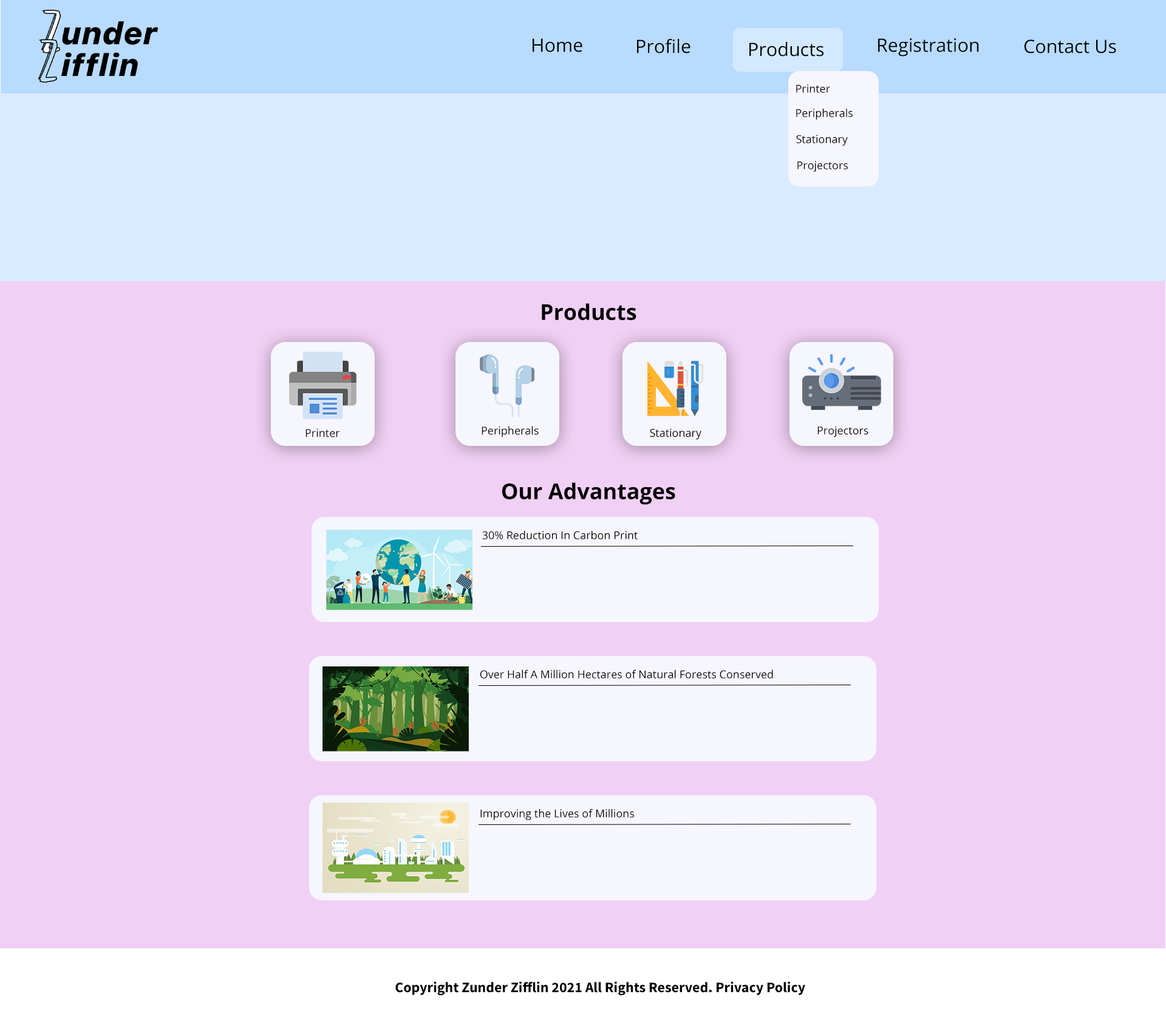
<style>
.page{position:relative;width:1166px;height:1023px;background:#f1d0f5}
.page>*{position:absolute;margin:0}
.t1{font:18.5px "OpenSans-Regular";color:#000000}
.t2{font:10.9px "OpenSans-Regular";color:#000000}
.t3{font:21.9px "OpenSans-Bold";color:#000000}
.t4{font:14.6px "SourceSansRoman-Bold";color:#000000}
</style>
<div class="page">
<p class="t1" style="left:533px;top:38px;width:49px;height:14px">Home</p>
<p class="t1" style="left:637px;top:39px;width:53px;height:14px">Profile</p>
<p class="t1" style="left:749px;top:42px;width:74px;height:14px">Products</p>
<p class="t1" style="left:878px;top:38px;width:101px;height:18px">Registration</p>
<p class="t1" style="left:1024px;top:39px;width:92px;height:14px">Contact Us</p>
<p class="t2" style="left:796px;top:84px;width:34px;height:9px">Printer</p>
<p class="t2" style="left:796px;top:108px;width:57px;height:12px">Peripherals</p>
<p class="t2" style="left:796px;top:135px;width:52px;height:11px">Stationary</p>
<p class="t2" style="left:797px;top:161px;width:51px;height:11px">Projectors</p>
<p class="t3" style="left:542px;top:303px;width:94px;height:17px">Products</p>
<p class="t2" style="left:482px;top:426px;width:57px;height:11px">Peripherals</p>
<p class="t2" style="left:817px;top:426px;width:51px;height:11px">Projectors</p>
<p class="t2" style="left:305px;top:428px;width:35px;height:9px">Printer</p>
<p class="t2" style="left:650px;top:428px;width:51px;height:12px">Stationary</p>
<p class="t3" style="left:502px;top:482px;width:173px;height:23px">Our Advantages</p>
<p class="t2" style="left:482px;top:530px;width:156px;height:9px">30% Reduction In Carbon Print</p>
<p class="t2" style="left:480px;top:669px;width:293px;height:9px">Over Half A Million Hectares of Natural Forests Conserved</p>
<p class="t2" style="left:480px;top:808px;width:154px;height:12px">Improving the Lives of Millions</p>
<p class="t4" style="left:395px;top:981px;width:410px;height:14px">Copyright Zunder Zifflin 2021 All Rights Reserved. Privacy Policy</p>
</div>
